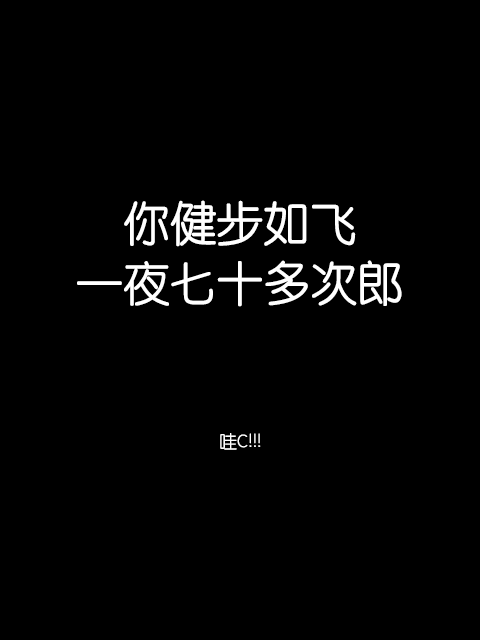
<style>
.page{position:relative;width:480px;height:640px;background:#000000}
.page>*{position:absolute;margin:0}
.t1{font:46.9px/60px "STYuanti-SC-Regular";color:#ffffff}
.t2{font:18px "STYuanti-SC-Regular";color:#ffffff}
</style>
<div class="page">
<p class="t1" style="left:77px;top:200px;width:325px;height:107px;text-align:center">你健步如飞<br>一夜七十多次郎</p>
<p class="t2" style="left:220px;top:433px;width:41px;height:17px">哇C!!!</p>
</div>
